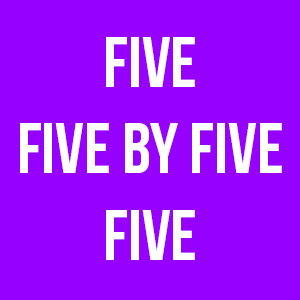
<style>
.page{position:relative;width:300px;height:300px;background:#9600ff}
.page>*{position:absolute;margin:0}
.t1{font:72px "BebasNeue";color:#ffffff}
</style>
<div class="page">
<p class="t1" style="left:20px;top:37px;width:262px;height:223px;text-align:center">Five<br>FIVE BY FIVE<br>FIVE</p>
</div>
